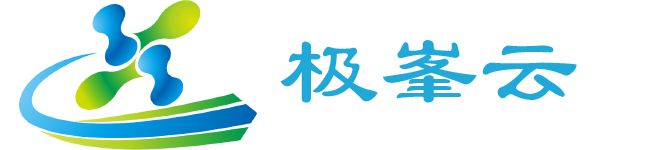
<style>
.page{position:relative;width:650px;height:150px;background:#ffffff}
.page>*{position:absolute;margin:0}
.t1{font:100px "LiSu";color:#20a8d8}
</style>
<div class="page">
<p class="t1" style="left:280px;top:40px;width:297px;height:63px">极峯云</p>
</div>
